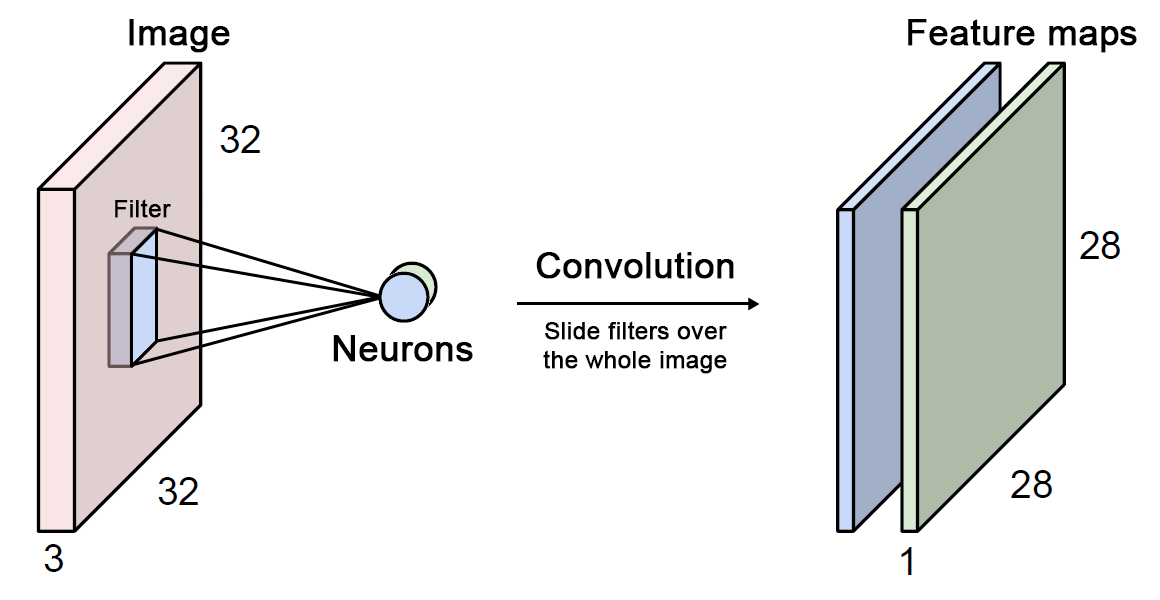
<style>
.page{position:relative;width:1160px;height:600px;background:#ffffff}
.page>*{position:absolute;margin:0}
.t1{font:36px "ArialMT";color:#000000;font-weight:bold}
.t2{font:24px "ArialMT";color:#000000;font-weight:bold}
</style>
<div class="page">
<p class="t1" style="left:129px;top:19px;width:101px;height:34px">Image</p>
<p class="t1" style="left:908px;top:19px;width:229px;height:34px">Feature maps</p>
<p class="t2" style="left:115px;top:199px;width:56px;height:19px">Filter</p>
<p class="t1" style="left:536px;top:252px;width:198px;height:27px">Convolution</p>
<p class="t2" style="left:543px;top:321px;width:184px;height:53px;text-align:center">Slide filters over<br>the whole image</p>
<p class="t1" style="left:333px;top:335px;width:140px;height:27px">Neurons</p>
</div>
